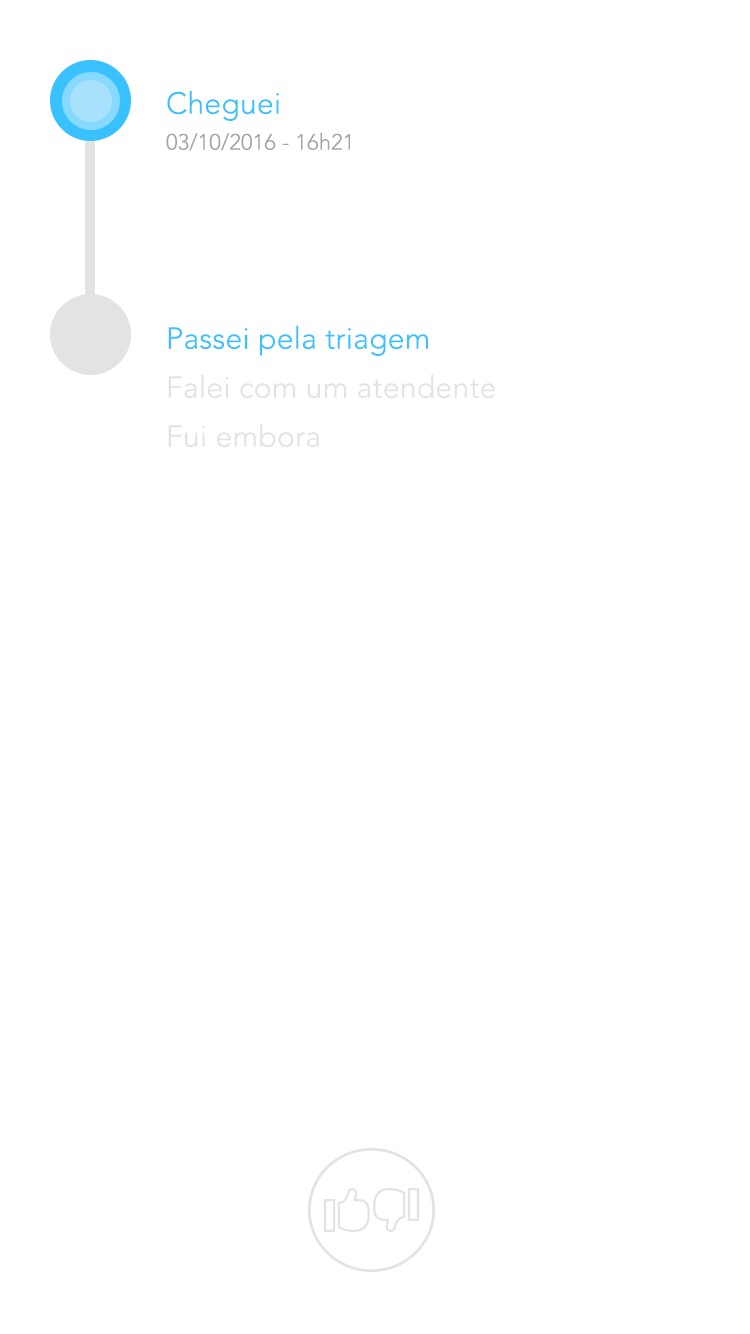
<style>
.page{position:relative;width:750px;height:1334px;background:#ffffff}
.page>*{position:absolute;margin:0}
.t1{font:30px "AvenirLTStd-Light";letter-spacing:0.01em;color:#39c0ff}
.t2{font:22px "AvenirLTStd-Light";letter-spacing:0.01em;color:#a3a4a4}
.t3{font:30px "AvenirLTStd-Light";letter-spacing:0.01em;color:#e3e3e3}
</style>
<div class="page">
<p class="t1" style="left:167px;top:90px;width:112px;height:31px">Cheguei</p>
<p class="t2" style="left:166px;top:132px;width:184px;height:19px">03/10/2016 - 16h21</p>
<p class="t1" style="left:168px;top:325px;width:260px;height:31px">Passei pela triagem</p>
<p class="t3" style="left:168px;top:374px;width:327px;height:25px">Falei com um atendente</p>
<p class="t3" style="left:168px;top:423px;width:151px;height:25px">Fui embora</p>
</div>
